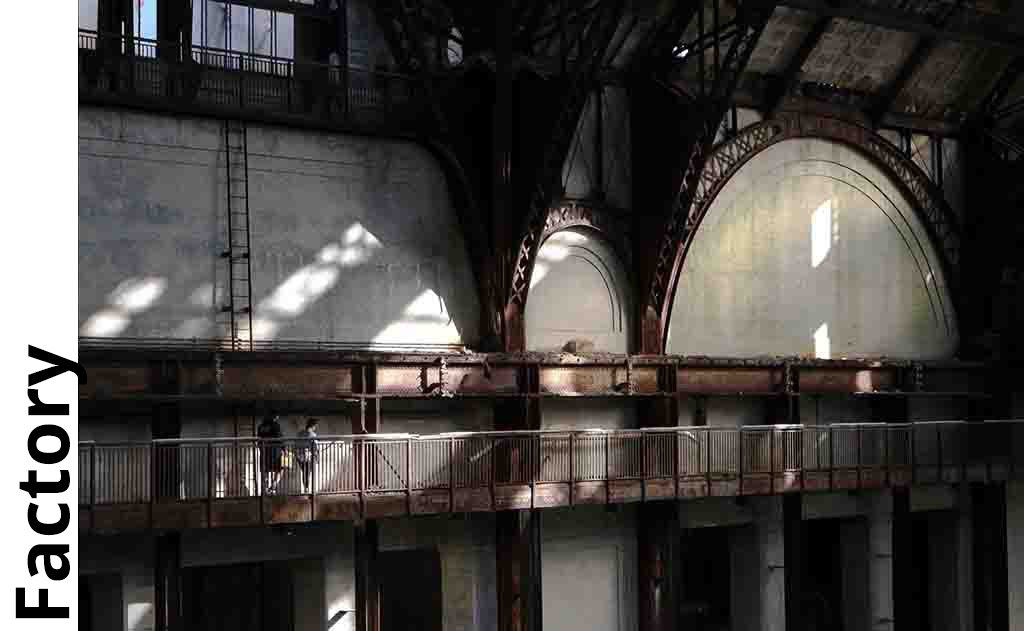
<style>
.page{position:relative;width:1024px;height:631px}
.page>*{position:absolute;margin:0}
.t1{font:75px "OpenSans-Bold";color:#000000}
</style>
<div class="page">
<p class="t1" style="left:15px;top:344px;width:73px;height:275px;rotate:-90deg">Factory</p>
</div>
